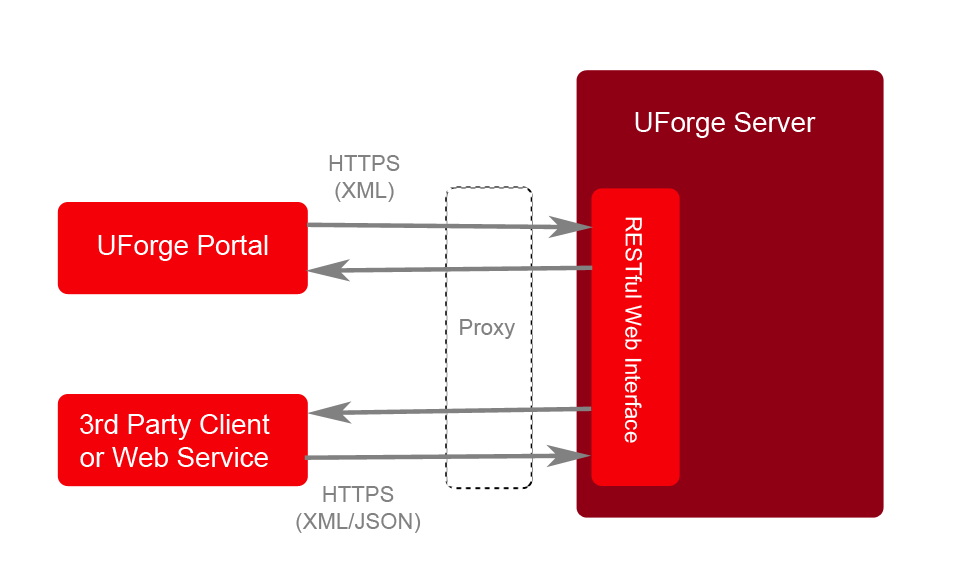
<style>
.page{position:relative;width:953px;height:586px;background:#ffffff}
.page>*{position:absolute;margin:0}
.t1{font:27.7px "ArialMT";color:#ffffff}
.t2{font:22.2px "ArialMT";color:#818181}
.t3{font:22.2px "ArialMT";color:#ffffff}
</style>
<div class="page">
<p class="t1" style="left:635px;top:112px;width:181px;height:26px">UForge Server</p>
<p class="t2" style="left:329px;top:155px;width:71px;height:47px;text-align:center">HTTPS<br>(XML)</p>
<p class="t3" style="left:624px;top:217px;width:19px;height:226px;rotate:90deg">RESTful Web Interface</p>
<p class="t1" style="left:98px;top:235px;width:170px;height:26px">UForge Portal</p>
<p class="t2" style="left:460px;top:319px;width:55px;height:20px">Proxy</p>
<p class="t1" style="left:80px;top:414px;width:190px;height:53px;text-align:center">3rd Party Client<br>or Web Service</p>
<p class="t2" style="left:296px;top:486px;width:125px;height:47px;text-align:center">HTTPS<br>(XML/JSON)</p>
</div>
